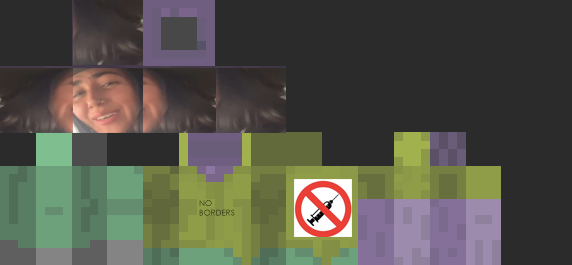
<style>
.page{position:relative;width:572px;height:265px;background:#2b2b2b}
.page>*{position:absolute;margin:0}
.t1{font:8px "CenturyGothic";letter-spacing:0.005em}
</style>
<div class="page">
<p class="t1" style="left:199px;top:200px;width:36px;height:16px">NO<br>BORDERS</p>
</div>
